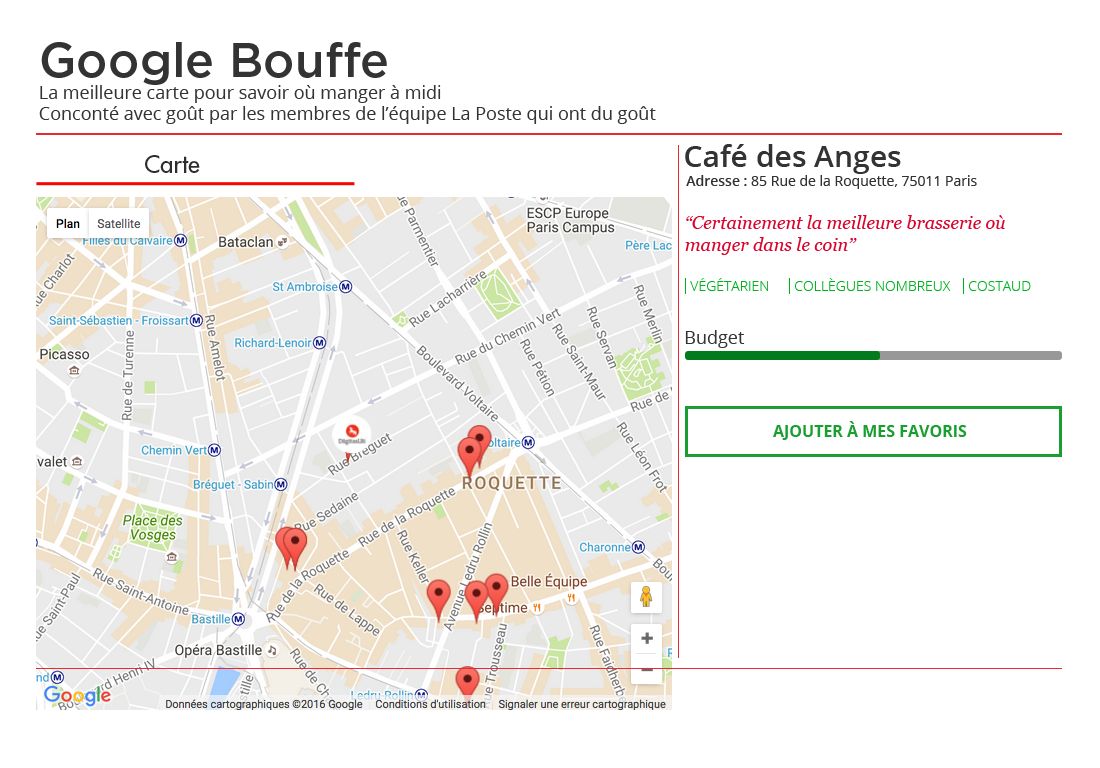
<style>
.page{position:relative;width:1100px;height:768px;background:#ffffff}
.page>*{position:absolute;margin:0}
.t1{font:18px "OpenSans";color:#333333}
.t2{font:48px "Gotham-Medium";color:#333333}
.t3{font:30px "OpenSans-Semibold";color:#333333}
.t4{font:24px "FuturaStd-Medium";color:#2d2d2d}
.t5{font:14px "OpenSans";color:#333333}
.t6{font:14px "OpenSans-Semibold";color:#333333}
.t7{font:18px "Georgia-Italic";color:#da032c}
.t8{font:14px "OpenSans-Light";color:#00b21f}
.t9{font:16px "OpenSans-Bold";color:#199e30;text-transform:uppercase}
</style>
<div class="page">
<p class="t1" style="left:39px;top:42px;width:617px;height:82px"><span class="t2">Google Bouffe<br></span>La meilleure carte pour savoir où manger à midi<br>Conconté avec goût par les membres de l’équipe La Poste qui ont du goût</p>
<p class="t3" style="left:685px;top:144px;width:216px;height:30px">Café des Anges</p>
<p class="t4" style="left:145px;top:155px;width:55px;height:18px">Carte</p>
<p class="t5" style="left:686px;top:175px;width:291px;height:14px"><span class="t6">Adresse : </span>85 Rue de la Roquette, 75011 Paris</p>
<p class="t7" style="left:685px;top:215px;width:320px;height:40px">‘‘Certainement la meilleure brasserie où manger dans le coin’’</p>
<p class="t8" style="left:690px;top:278px;width:78px;height:13px">VÉGÉTARIEN</p>
<p class="t8" style="left:795px;top:278px;width:156px;height:13px">COLLÈGUES NOMBREUX</p>
<p class="t8" style="left:969px;top:281px;width:62px;height:10px">COSTAUD</p>
<p class="t1" style="left:685px;top:330px;width:60px;height:18px">Budget</p>
<p class="t9" style="left:773px;top:421px;width:194px;height:19px">Ajouter à mes favoris</p>
</div>
